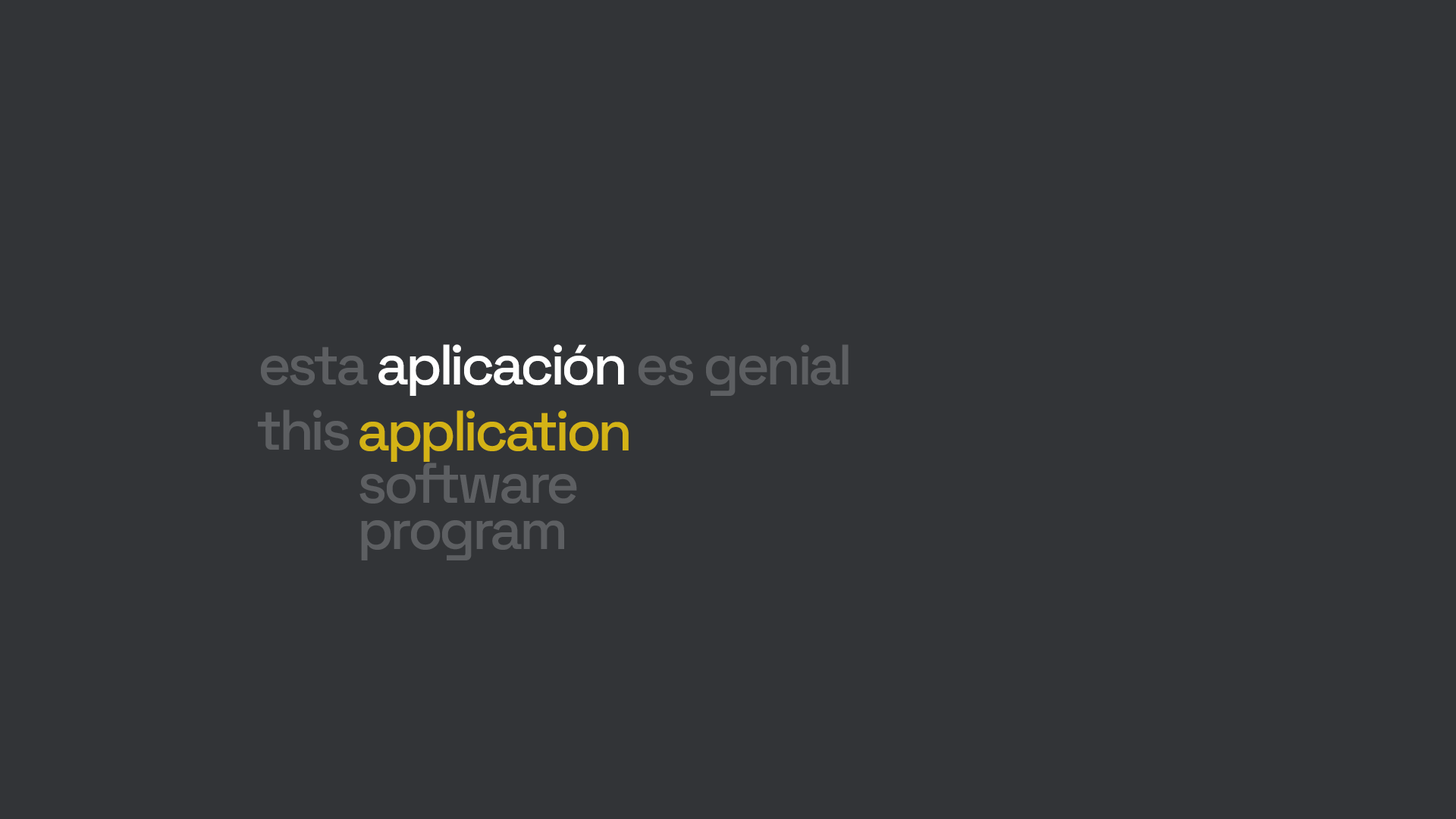
<style>
.page{position:relative;width:1456px;height:819px;background:#323437}
.page>*{position:absolute;margin:0}
.t1{font:56.9px "SpaceGrotesk-Medium";letter-spacing:-0.06em;color:#ffffff}
.t2{font:56.9px "SpaceGrotesk-Medium";letter-spacing:-0.06em;color:#5d5f62}
.t3{font:56.9px "SpaceGrotesk-Medium";letter-spacing:-0.06em;color:#d4b316}
</style>
<div class="page">
<p class="t1" style="left:261px;top:344px;width:588px;height:52px"><span class="t2">esta </span>aplicación<span class="t2"> es genial</span></p>
<p class="t2" style="left:258px;top:409px;width:91px;height:41px">this</p>
<p class="t3" style="left:359px;top:410px;width:270px;height:52px">application</p>
<p class="t2" style="left:359px;top:463px;width:218px;height:41px">software</p>
<p class="t2" style="left:361px;top:520px;width:203px;height:40px">program</p>
</div>
